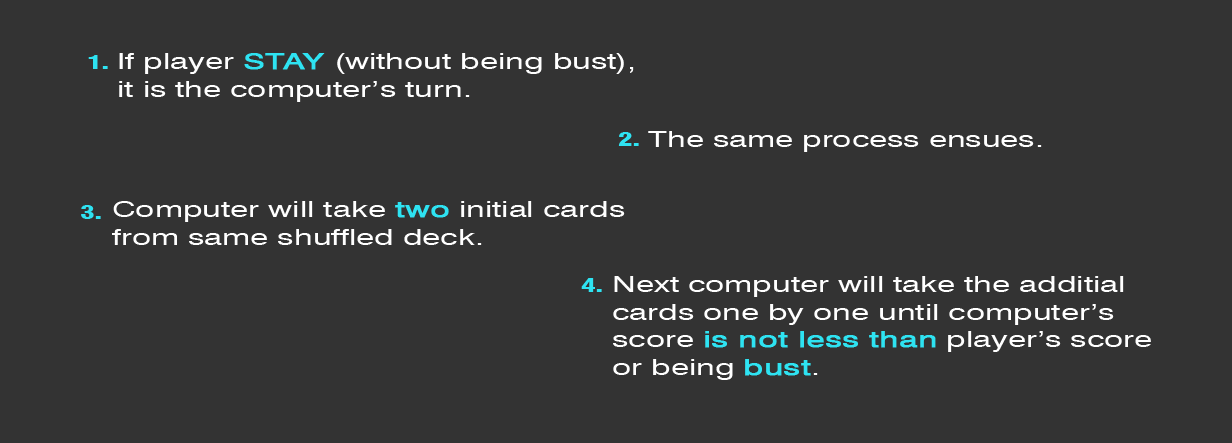
<style>
.page{position:relative;width:1232px;height:443px;background:#333333}
.page>*{position:absolute;margin:0}
.t1{font:22.9px "Swiss721BT-Roman";color:#ffffff;scale:1.44 1}
.t2{font:22.9px "Swiss721BT-Roman";color:#2ee3f2;font-weight:bold;scale:1.44 1}
.t3{font:18.8px "Swiss721BT-BlackCondensed";color:#2ee3f2;scale:1.48 1}
</style>
<div class="page">
<p class="t1" style="left:119px;top:53px;width:515px;height:49px">If player <span class="t2">STAY </span>(without being bust),<br>it is the computer’s turn.</p>
<p class="t3" style="left:88px;top:55px;width:20px;height:14px">1.</p>
<p class="t3" style="left:618px;top:132px;width:21px;height:14px">2.</p>
<p class="t1" style="left:648px;top:131px;width:394px;height:21px">The same process ensues.</p>
<p class="t3" style="left:81px;top:205px;width:20px;height:14px">3.</p>
<p class="t1" style="left:112px;top:201px;width:513px;height:44px">Computer will take <span class="t2">two</span> initial cards<br>from same shuffled deck.</p>
<p class="t3" style="left:581px;top:278px;width:21px;height:14px">4.</p>
<p class="t1" style="left:613px;top:276px;width:538px;height:104px">Next computer will take the additial <br>cards one by one until computer’s <br>score <span class="t2">is not less than</span> player’s score <br>or being <span class="t2">bust</span>.</p>
</div>
